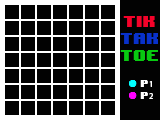
<style>
.page{position:relative;width:160px;height:120px;background:#020202}
.page>*{position:absolute;margin:0}
.t1{font:13px "8BITWONDERNominal";color:#f5022a}
.t2{font:13px "8BITWONDERNominal";color:#0831c9}
.t3{font:13px "8BITWONDERNominal";color:#08c911}
.t4{font:8px "8BITWONDERNominal";color:#ffffff}
.t5{font:8px "MyriadPro-Regular";color:#ffffff}
</style>
<div class="page">
<p class="t1" style="left:123px;top:16px;width:32px;height:11px">TIK</p>
<p class="t2" style="left:120px;top:33px;width:38px;height:11px">TAK</p>
<p class="t3" style="left:120px;top:50px;width:38px;height:11px">TOE</p>
<p class="t4" style="left:140px;top:80px;width:12px;height:7px">P<span class="t5">1</span></p>
<p class="t4" style="left:140px;top:92px;width:13px;height:7px">P<span class="t5">2</span></p>
</div>
